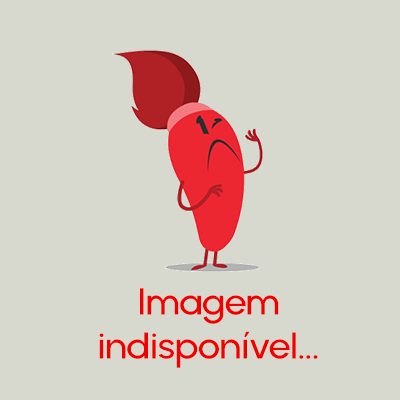
<style>
.page{position:relative;width:400px;height:400px;background:#d7d9ce}
.page>*{position:absolute;margin:0}
.t1{font:37.2px/44px "Urbanist-SemiBold";letter-spacing:-0.02em;color:#f20000;scale:1.08 1}
</style>
<div class="page">
<p class="t1" style="left:99px;top:288px;width:219px;height:80px;text-align:center">Imagem<br>indisponível...</p>
</div>
